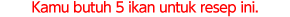
<style>
.page{position:relative;width:290px;height:17px;background:#ffffff}
.page>*{position:absolute;margin:0}
.t1{font:14px "UDShinGoPro-Medium";letter-spacing:-0.04em;color:#ff0000}
</style>
<div class="page">
<p class="t1" style="left:32px;top:1px;width:226px;height:16px">Kamu butuh 5 ikan untuk resep ini.</p>
</div>
